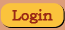
<style>
.page{position:relative;width:65px;height:30px;background:#fbc33c}
.page>*{position:absolute;margin:0}
.t1{font:14.6px "BookmanOldStyle";color:#9a2a14;font-weight:bold}
</style>
<div class="page">
<p class="t1" style="left:12px;top:9px;width:41px;height:15px">Login</p>
</div>
